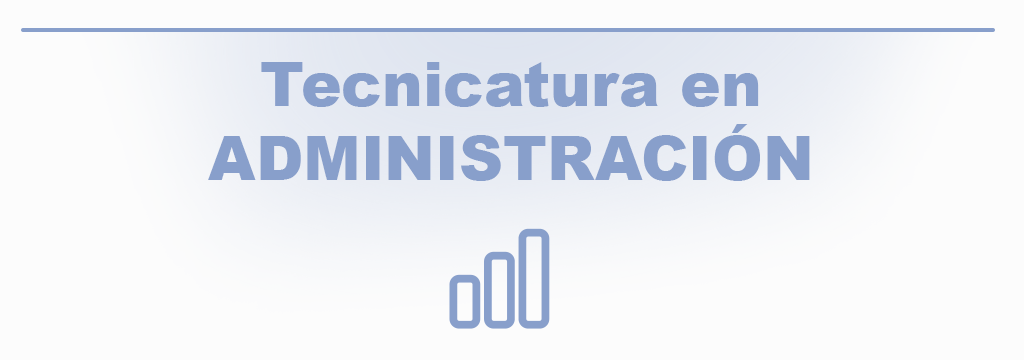
<style>
.page{position:relative;width:1024px;height:360px;background:#fcfcfc}
.page>*{position:absolute;margin:0}
.t1{font:61px "Arial-Black";color:#889fcb}
</style>
<div class="page">
<p class="t1" style="left:208px;top:62px;width:602px;height:119px;text-align:center">Tecnicatura en<br>ADMINISTRACIÓN</p>
</div>
